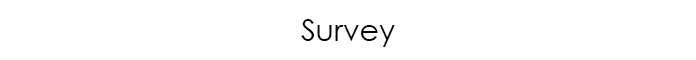
<style>
.page{position:relative;width:696px;height:60px;background:#ffffff}
.page>*{position:absolute;margin:0}
.t1{font:30px "CenturyGothic";color:#000000}
</style>
<div class="page">
<p class="t1" style="left:301px;top:19px;width:94px;height:28px">Survey</p>
</div>
